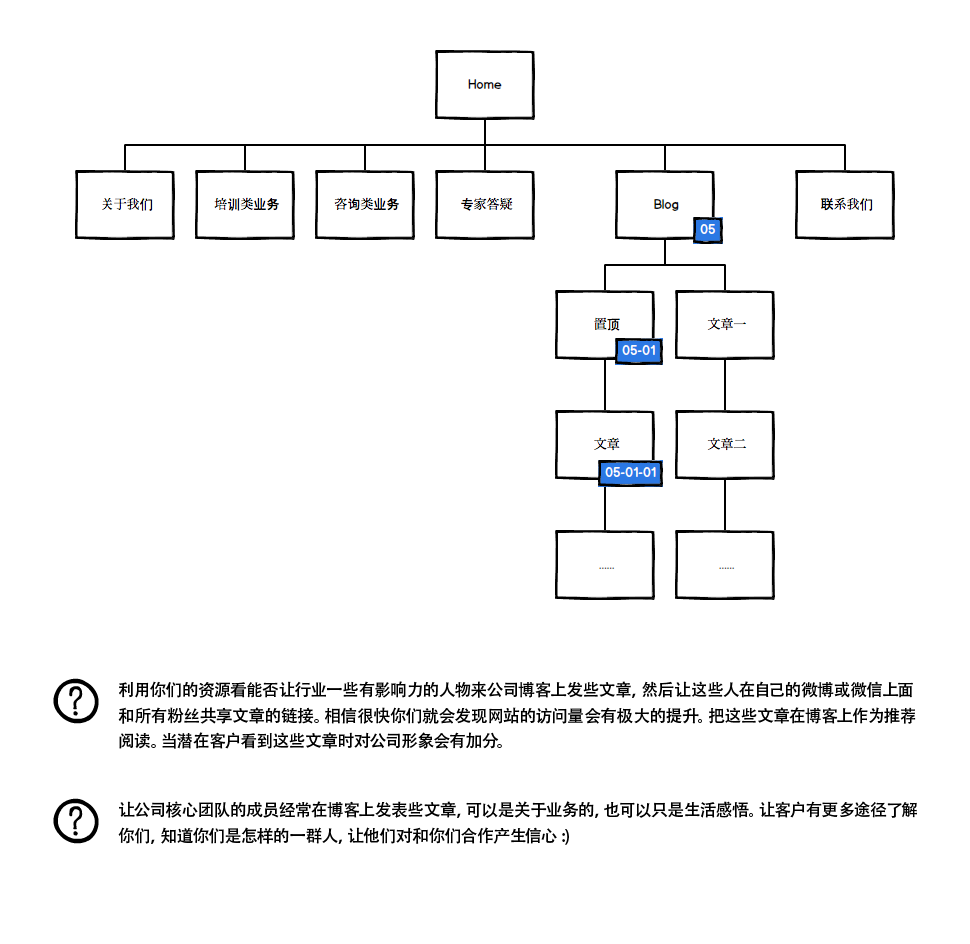
<style>
.page{position:relative;width:970px;height:944px;background:#ffffff}
.page>*{position:absolute;margin:0}
.t1{font:16.8px/25.2px "AdobeHeitiStd-Regular";color:#000000}
</style>
<div class="page">
<p class="t1" style="left:118px;top:681px;width:798px;height:68px">利用你们的资源看能否让行业一些有影响力的人物来公司博客上发些文章，然后让这些人在自己的微博或微信上面和所有粉丝共享文章的链接。相信很快你们就会发现网站的访问量会有极大的提升。把这些文章在博客上作为推荐阅读。当潜在客户看到这些文章时对公司形象会有加分。</p>
<p class="t1" style="left:118px;top:801px;width:799px;height:44px">让公司核心团队的成员经常在博客上发表些文章，可以是关于业务的，也可以只是生活感悟。让客户有更多途径了解你们，知道你们是怎样的一群人，让他们对和你们合作产生信心 :)</p>
</div>
